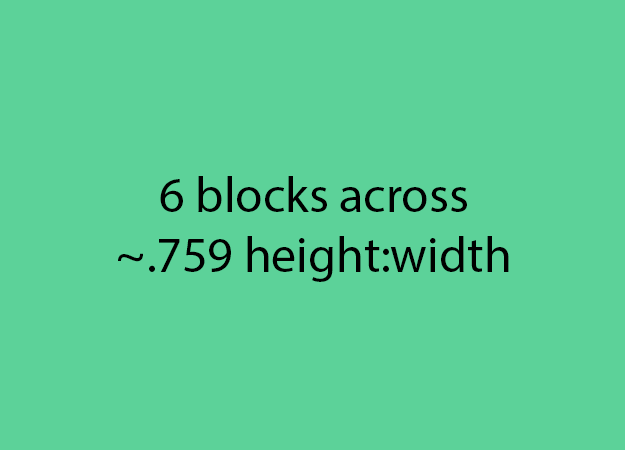
<style>
.page{position:relative;width:625px;height:450px;background:#5cd299}
.page>*{position:absolute;margin:0}
.t1{font:12px "MyriadPro-Regular";color:#000000}
</style>
<div class="page">
<p class="t1" style="left:118px;top:176px;width:391px;height:106px;text-align:center">6 blocks across<br>~.759 height:width</p>
</div>
